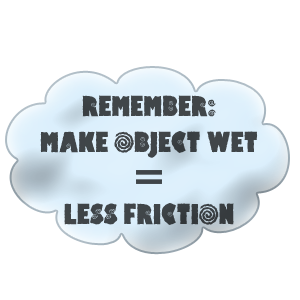
<style>
.page{position:relative;width:300px;height:300px;background:#ffffff}
.page>*{position:absolute;margin:0}
.t1{font:30px "HippoCritic";color:#404649}
</style>
<div class="page">
<p class="t1" style="left:40px;top:95px;width:218px;height:130px;text-align:center">REMEMBER:<br>MAKE OBJECT WET<br><br>LESS FRICTION</p>
</div>
